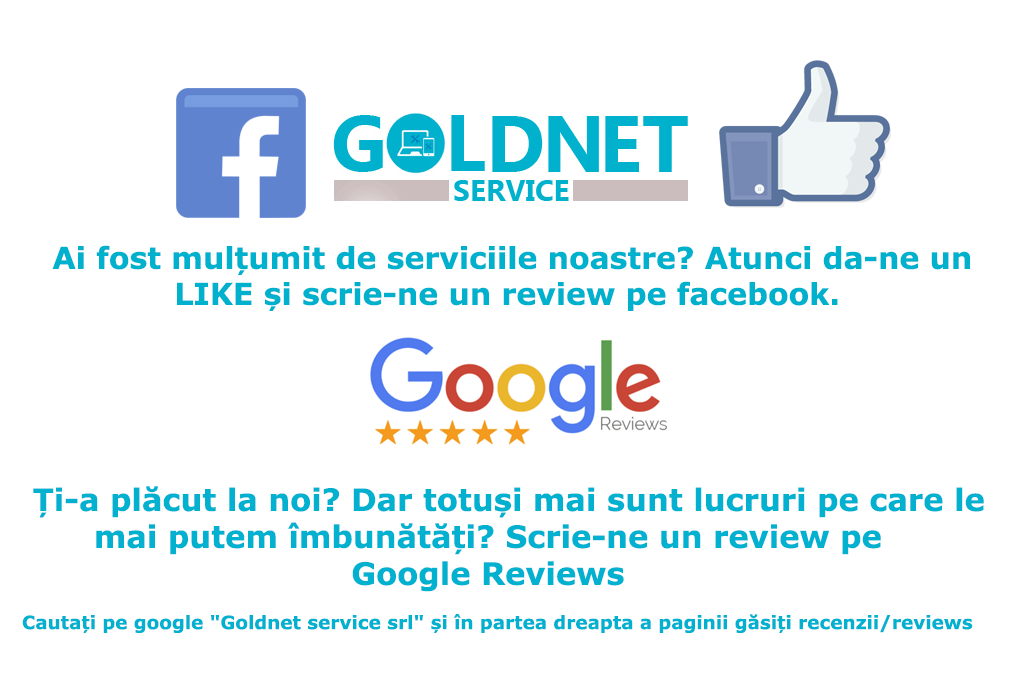
<style>
.page{position:relative;width:1024px;height:700px;background:#ffffff}
.page>*{position:absolute;margin:0}
.t1{font:30px "Verdana-Bold";color:#00b1cd}
.t2{font:30.8px "Verdana-Bold";color:#02b1d0}
.t3{font:18.5px "Verdana-Bold";color:#02b1d0}
</style>
<div class="page">
<p class="t1" style="left:52px;top:245px;width:918px;height:66px;text-align:center">Ai fost mulțumit de serviciile noastre? Atunci da-ne un LIKE și scrie-ne un review pe facebook.</p>
<p class="t2" style="left:22px;top:486px;width:962px;height:147px;text-align:center">Ți-a plăcut la noi? Dar totuși mai sunt lucruri pe care le mai putem îmbunătăți? Scrie-ne un review pe <br>Google Reviews<br><span class="t3"><br>   Cautați pe google "Goldnet service srl" și în partea dreapta a paginii găsiți recenzii/reviews</span></p>
</div>
